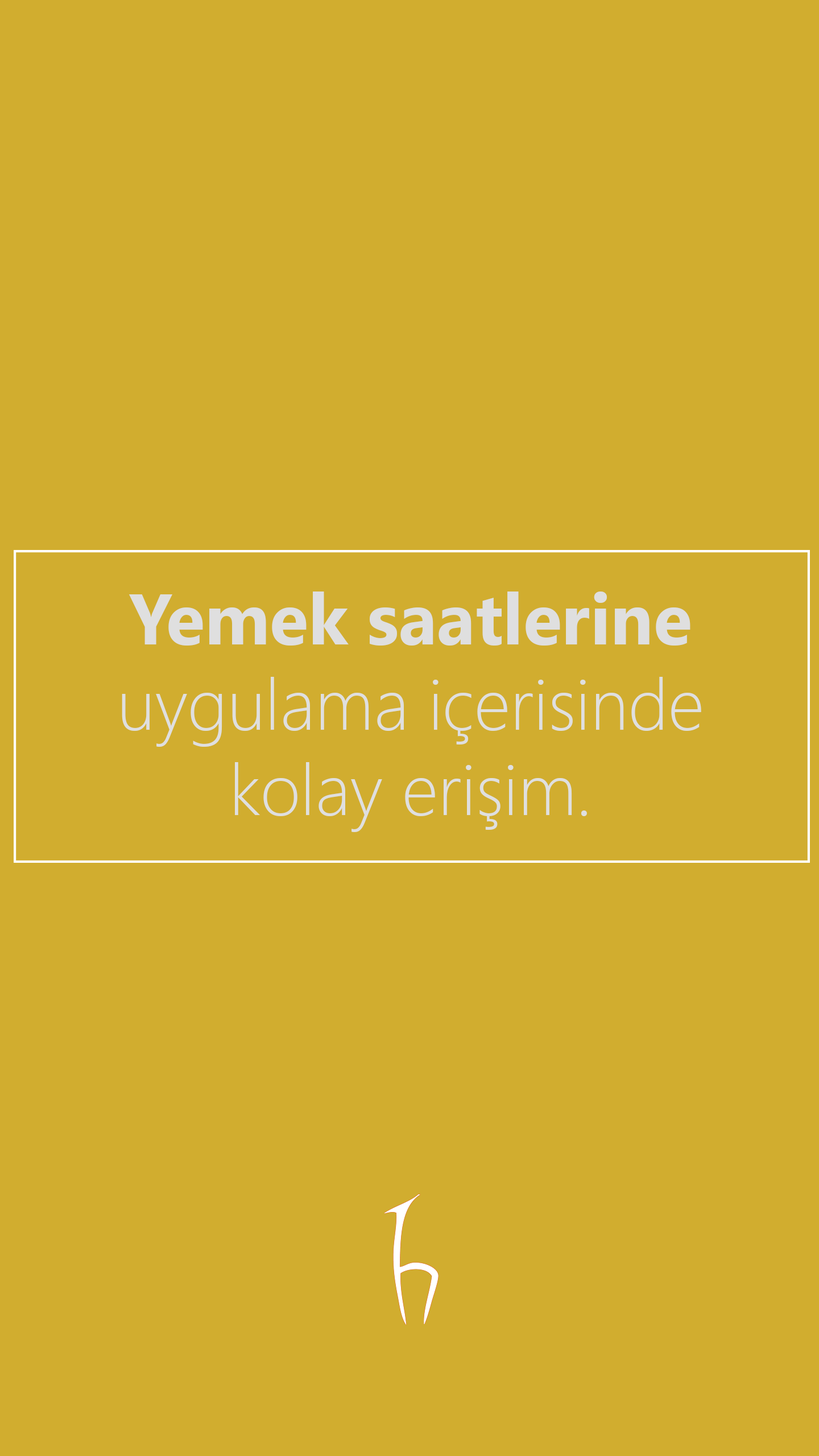
<style>
.page{position:relative;width:819px;height:1456px;background:#d1ad2f}
.page>*{position:absolute;margin:0}
.t1{font:71.1px "SegoeUI-Light";color:#dfdfdf}
.t2{font:71.1px "SegoeUI-Bold";color:#dfdfdf}
</style>
<div class="page">
<p class="t1" style="left:122px;top:591px;width:579px;height:241px;text-align:center"><span class="t2">Yemek saatlerine<br></span>uygulama içerisinde<br>kolay erişim.</p>
</div>
